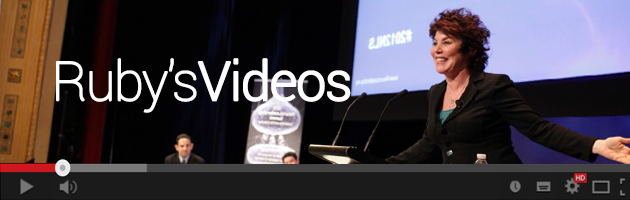
<style>
.page{position:relative;width:630px;height:200px}
.page>*{position:absolute;margin:0}
.t1{font:54px "Roboto-Thin";letter-spacing:-0.05em;color:#ffffff;font-weight:bold}
.t2{font:54px "Roboto-Light";letter-spacing:-0.05em;color:#ffffff;font-weight:bold}
</style>
<div class="page">
<p class="t1" style="left:56px;top:58px;width:295px;height:55px">Ruby’s<span class="t2">Videos</span></p>
</div>
